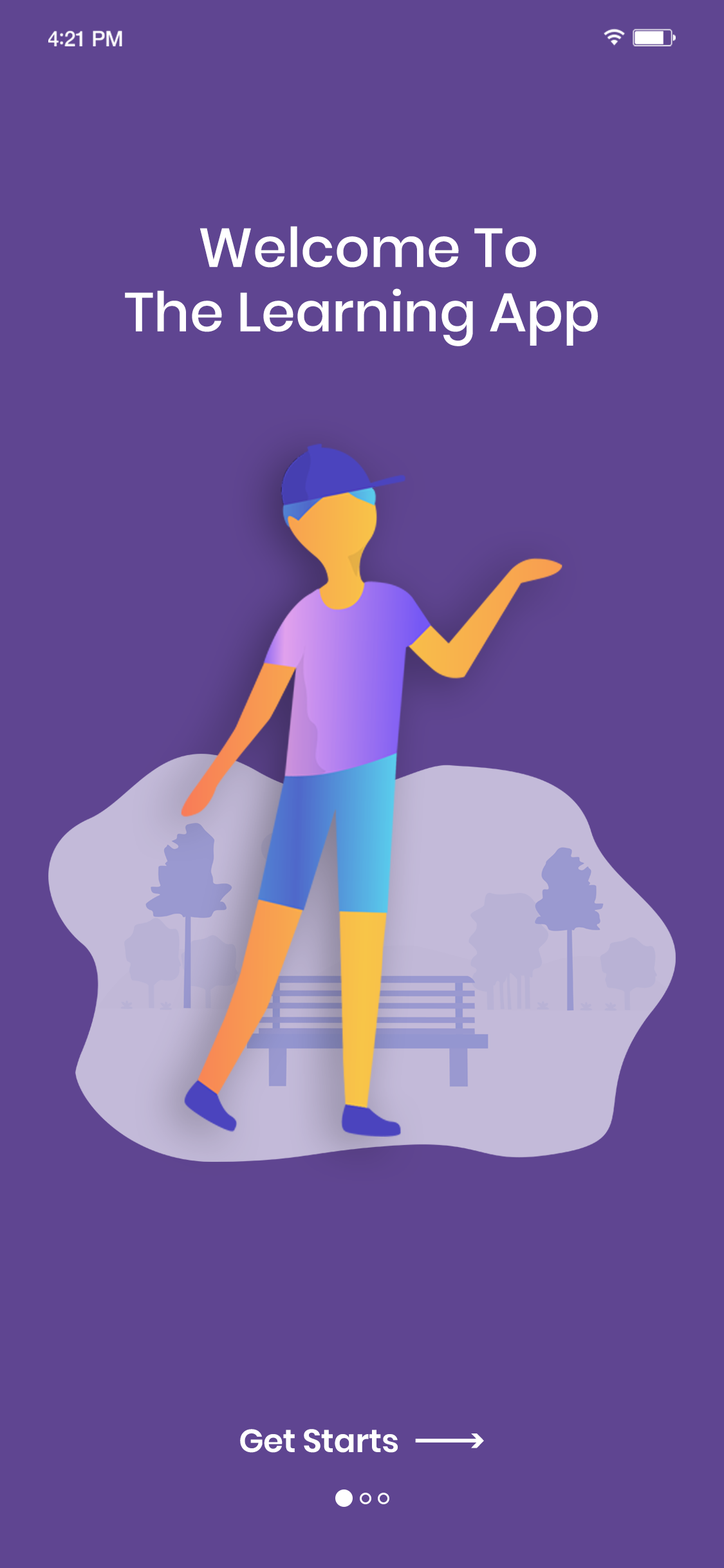
<style>
.page{position:relative;width:724px;height:1568px;background:#5f4591}
.page>*{position:absolute;margin:0}
.t1{font:54.7px/64.4px "Poppins-Medium";color:#ffffff}
.t2{font:32.2px "Poppins-SemiBold";letter-spacing:-0.005em;color:#ffffff}
.t3{font:32.2px "Poppins-SemiBold";letter-spacing:-0.35em;color:#ffffff}
</style>
<div class="page">
<p class="t1" style="left:125px;top:226px;width:473px;height:120px;text-align:center">Welcome To<br>The Learning App</p>
<p class="t2" style="left:240px;top:1429px;width:158px;height:24px">Get Starts</p>
<p class="t3" style="left:415px;top:1433px;width:69px;height:15px">----------&gt;</p>
</div>
